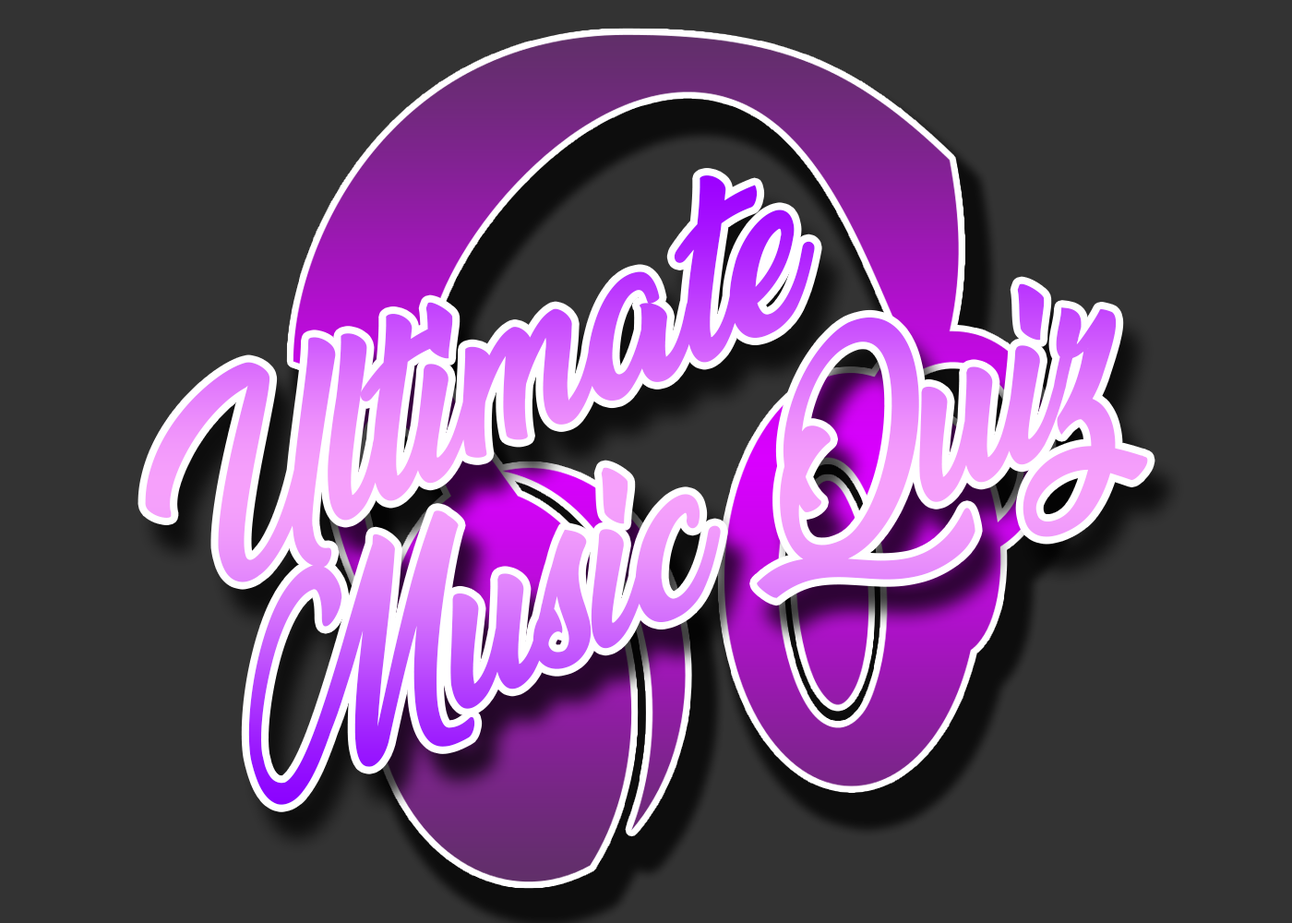
<style>
.page{position:relative;width:1292px;height:923px;background:#333333}
.page>*{position:absolute;margin:0}
.t1{font:184.6px "VeganStylePersonalUse"}
</style>
<div class="page">
<p class="t1" style="left:145px;top:175px;width:1003px;height:630px;rotate:-24deg">Ultimate<br>Music Quiz</p>
</div>
